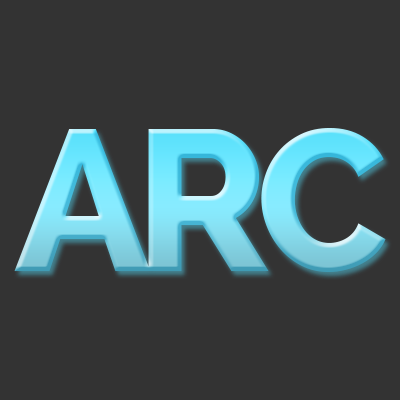
<style>
.page{position:relative;width:400px;height:400px;background:#333333}
.page>*{position:absolute;margin:0}
.t1{font:200px "Raleway-ExtraBold";letter-spacing:-0.075em}
</style>
<div class="page">
<p class="t1" style="left:14px;top:128px;width:372px;height:144px">ARC</p>
</div>
